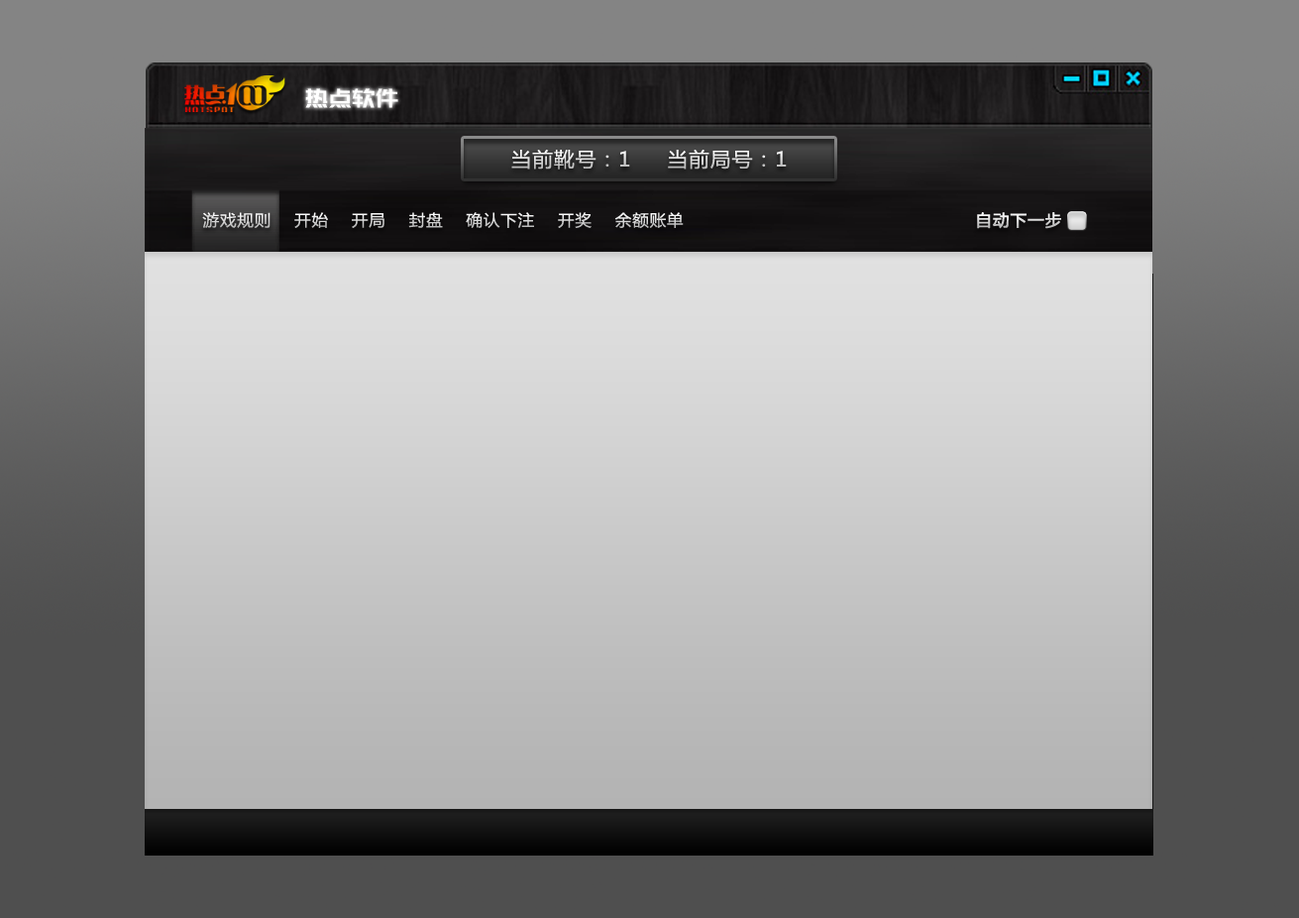
<style>
.page{position:relative;width:1299px;height:918px}
.page>*{position:absolute;margin:0}
.t1{font:31.7px "HuXiaoBoKuHei";color:#ffffff;scale:0.74 1}
.t2{font:19.8px "MicrosoftYaHei";letter-spacing:0.05em;scale:1.04 1}
.t3{font:15.9px "MicrosoftYaHei";letter-spacing:0.05em;scale:1.04 1}
.t4{font:15.9px "MicrosoftYaHei";letter-spacing:0.05em;font-weight:bold}
</style>
<div class="page">
<p class="t1" style="left:305px;top:88px;width:93px;height:20px">热点软件</p>
<p class="t2" style="left:511px;top:150px;width:276px;height:19px">当前靴号：1     当前局号：1</p>
<p class="t3" style="left:202px;top:212px;width:482px;height:17px">游戏规则    开始    开局    封盘    确认下注    开奖    余额账单</p>
<p class="t4" style="left:977px;top:212px;width:84px;height:17px">自动下一步</p>
</div>
